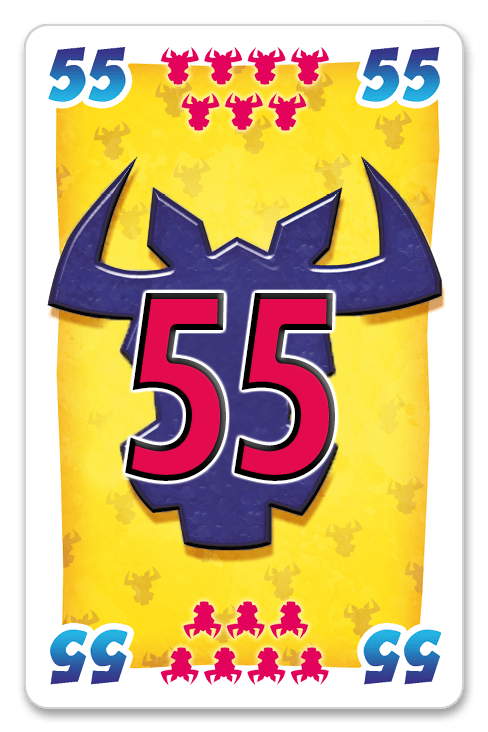
<style>
.page{position:relative;width:488px;height:732px;background:#ffffff}
.page>*{position:absolute;margin:0}
.t1{font:280px "TwCenMT-CondensedExtraBold";letter-spacing:-0.1em;color:#e30a4d}
</style>
<div class="page">
<p class="t1" style="left:125px;top:293px;width:210px;height:188px">55</p>
</div>
